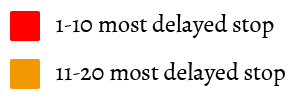
<style>
.page{position:relative;width:297px;height:101px;background:#ffffff}
.page>*{position:absolute;margin:0}
.t1{font:24px "Alegreya-Regular";color:#000000}
</style>
<div class="page">
<p class="t1" style="left:56px;top:14px;width:218px;height:24px">1-10 most delayed stop</p>
<p class="t1" style="left:56px;top:62px;width:229px;height:24px">11-20 most delayed stop</p>
</div>
